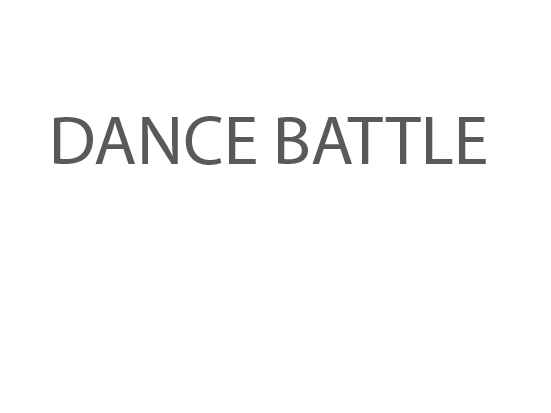
<style>
.page{position:relative;width:551px;height:413px;background:#ffffff}
.page>*{position:absolute;margin:0}
.t1{font:70px "MyriadHebrew-Regular";color:#595959}
</style>
<div class="page">
<p class="t1" style="left:54px;top:116px;width:432px;height:49px">DANCE BATTLE</p>
</div>
